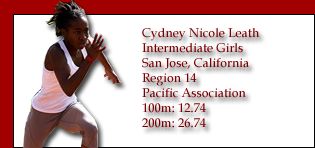
<style>
.page{position:relative;width:315px;height:148px;background:#ffffff}
.page>*{position:absolute;margin:0}
.t1{font:12.5px "BookAntiqua";color:#7b0002}
</style>
<div class="page">
<p class="t1" style="left:142px;top:28px;width:118px;height:100px">Cydney Nicole Leath<br>Intermediate Girls<br>San Jose, California<br>Region 14<br>Pacific Association<br>100m: 12.74<br>200m: 26.74</p>
</div>
